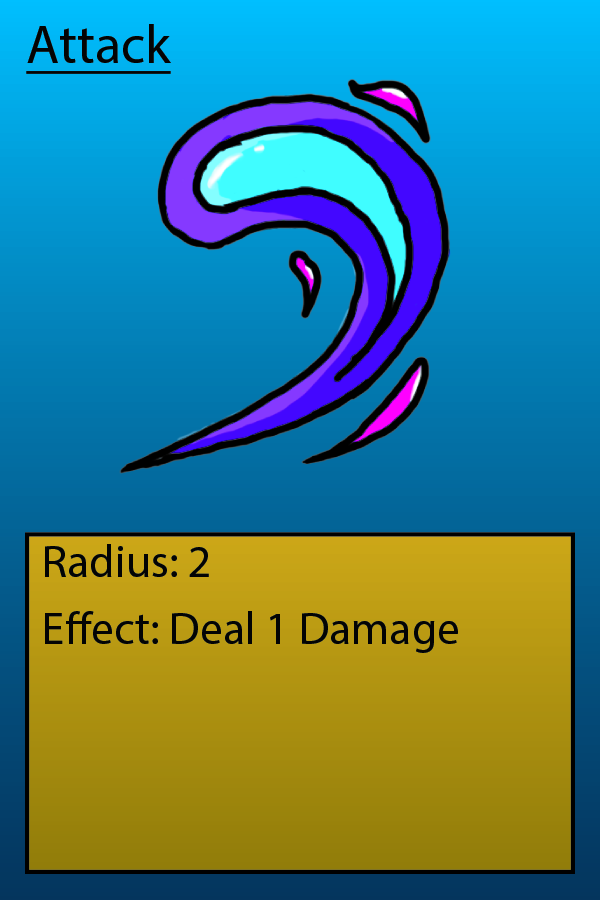
<style>
.page{position:relative;width:600px;height:900px}
.page>*{position:absolute;margin:0}
.t1{font:54.2px "Vatican-Medium";color:#000000;text-decoration:underline}
.t2{font:45.8px "Vatican-Medium";color:#000000}
</style>
<div class="page">
<p class="t1" style="left:26px;top:24px;width:145px;height:50px">Attack</p>
<p class="t2" style="left:45px;top:544px;width:413px;height:109px">Radius: 2<br>Effect: Deal 1 Damage</p>
</div>
